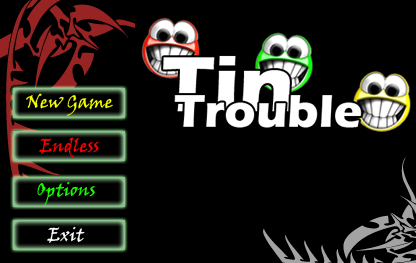
<style>
.page{position:relative;width:416px;height:263px;background:#000000}
.page>*{position:absolute;margin:0}
.t1{font:18px "VinerHandITC";color:#f6ff00}
.t2{font:18px "VinerHandITC";color:#ff0000}
.t3{font:18px "VinerHandITC";color:#18ff00}
.t4{font:18px "VinerHandITC";color:#ffffff}
</style>
<div class="page">
<p class="t1" style="left:26px;top:93px;width:87px;height:23px">New Game</p>
<p class="t2" style="left:39px;top:137px;width:60px;height:21px">Endless</p>
<p class="t3" style="left:37px;top:181px;width:58px;height:25px">Options</p>
<p class="t4" style="left:47px;top:226px;width:38px;height:17px">Exit</p>
</div>
